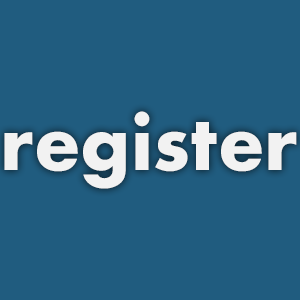
<style>
.page{position:relative;width:300px;height:300px;background:#205c7f}
.page>*{position:absolute;margin:0}
.t1{font:72px "Futura-Bold";color:#f2f2f2}
</style>
<div class="page">
<p class="t1" style="left:4px;top:111px;width:293px;height:78px">register</p>
</div>
